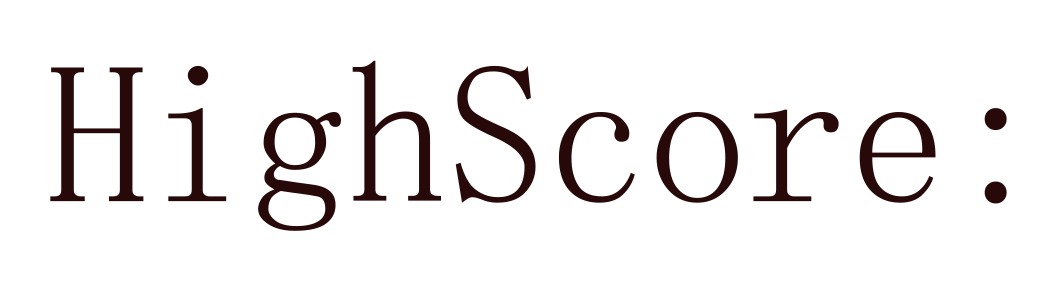
<style>
.page{position:relative;width:1063px;height:296px;background:#ffffff}
.page>*{position:absolute;margin:0}
.t1{font:200px "SimSun-ExtB";color:#270909}
</style>
<div class="page">
<p class="t1" style="left:50px;top:60px;width:957px;height:171px">HighScore:</p>
</div>
